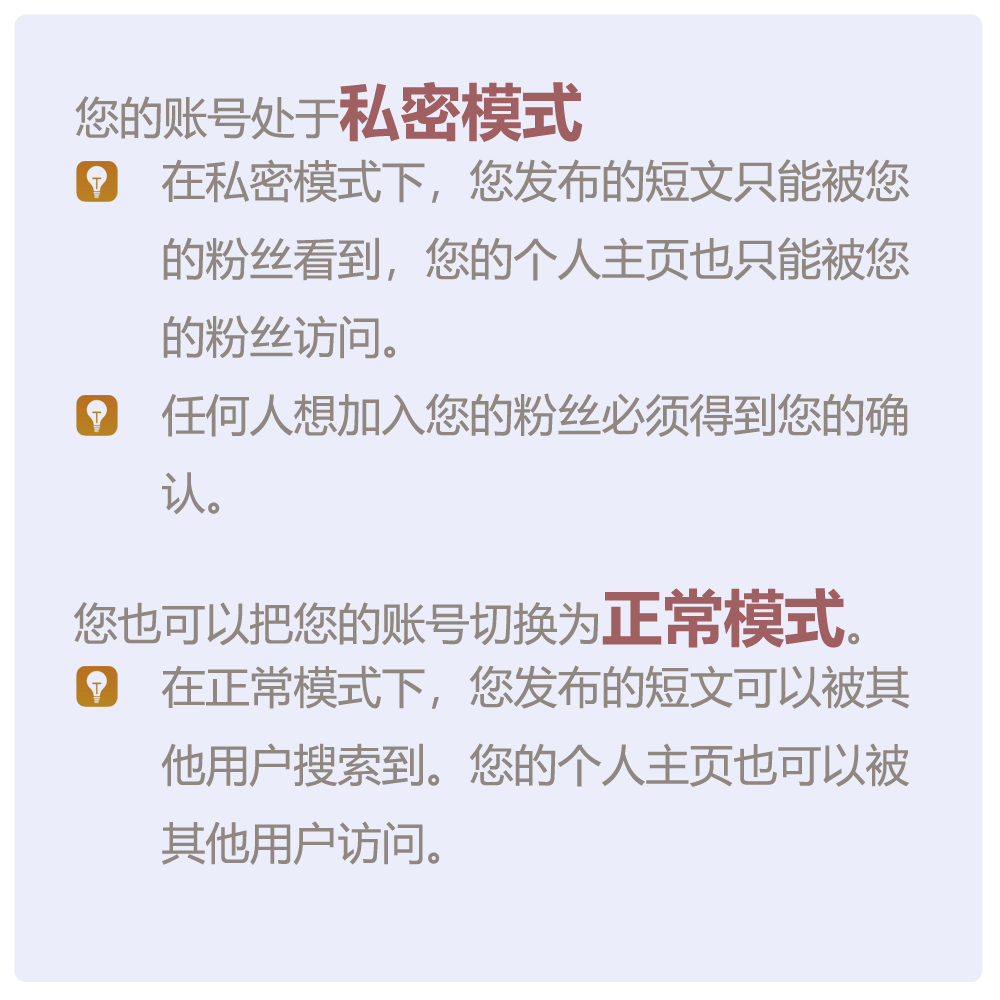
<style>
.page{position:relative;width:1000px;height:1000px;background:#ebeefa}
.page>*{position:absolute;margin:0}
.t1{font:44px/78px "MicrosoftYaHei";color:#908781}
.t2{font:61px/78px "MicrosoftYaHei-Bold";color:#a05f60}
.t3{font:44px/78px "SimSun";color:#908781}
.t4{font:44px/38px "MicrosoftYaHei";color:#908781}
</style>
<div class="page">
<p class="t1" style="left:73px;top:82px;width:837px;height:783px">您的账号处于<span class="t2">私密模式<br></span><span class="t3">◼◼</span>在私密模式下，您发布的短文只能被您<br><span class="t3">◼◼</span>的粉丝看到，您的个人主页也只能被您<br><span class="t3">◼◼</span>的粉丝访问。<br><span class="t3">◼◼</span>任何人想加入您的粉丝必须得到您的确<br><span class="t3">◼◼</span>认。<br><span class="t4"><br>您也可以把</span>您的账号切换为<span class="t2">正常模式</span>。<br><span class="t3">◼◼</span>在正常模式下，您发布的短文可以被其<br><span class="t3">◼◼</span>他用户搜索到。您的个人主页也可以被<br><span class="t3">◼◼</span>其他用户访问。</p>
</div>
